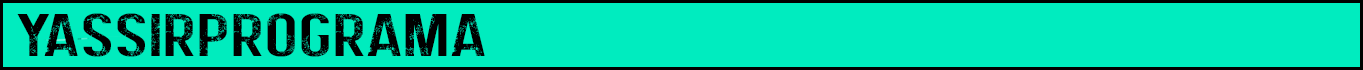
<style>
.page{position:relative;width:1363px;height:70px;background:#00ecbf}
.page>*{position:absolute;margin:0}
.t1{font:60px "EliteHackerCorroded";color:#000000}
</style>
<div class="page">
<p class="t1" style="left:17px;top:13px;width:468px;height:44px">YASSIRPROGRAMA</p>
</div>
